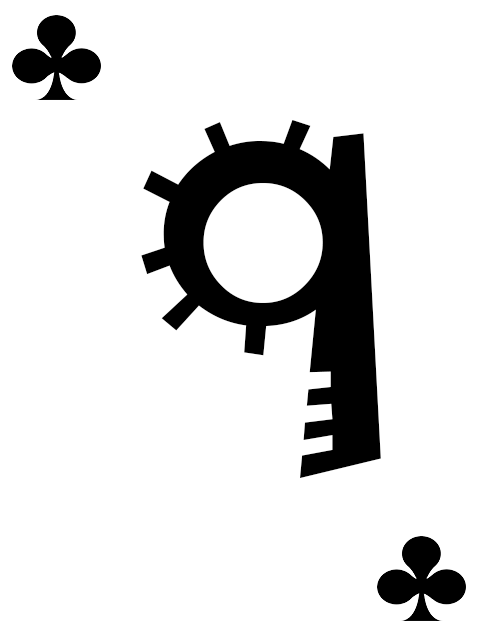
<style>
.page{position:relative;width:480px;height:640px;background:#ffffff}
.page>*{position:absolute;margin:0}
.t1{font:386.3px "Jokerman-Regular";color:#000000}
</style>
<div class="page">
<p class="t1" style="left:141px;top:120px;width:240px;height:358px">9</p>
</div>
